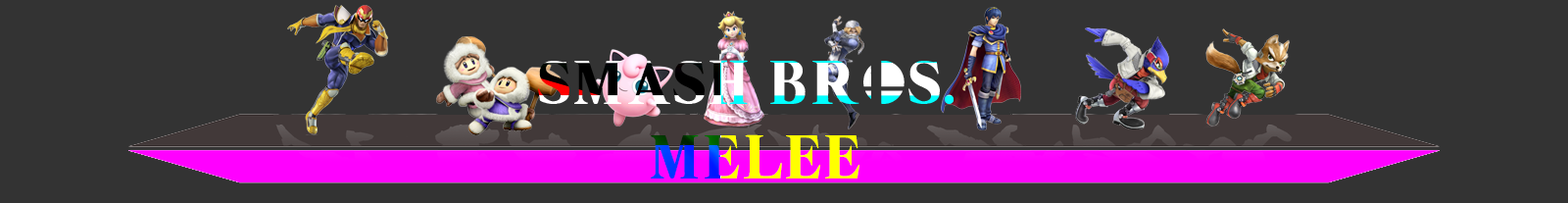
<style>
.page{position:relative;width:1568px;height:203px;background:#333333}
.page>*{position:absolute;margin:0}
.t1{font:61.7px "SuperSmash4.1"}
</style>
<div class="page">
<p class="t1" style="left:538px;top:60px;width:416px;height:118px;text-align:center">SMASH BROS. <br>MELEE</p>
</div>
